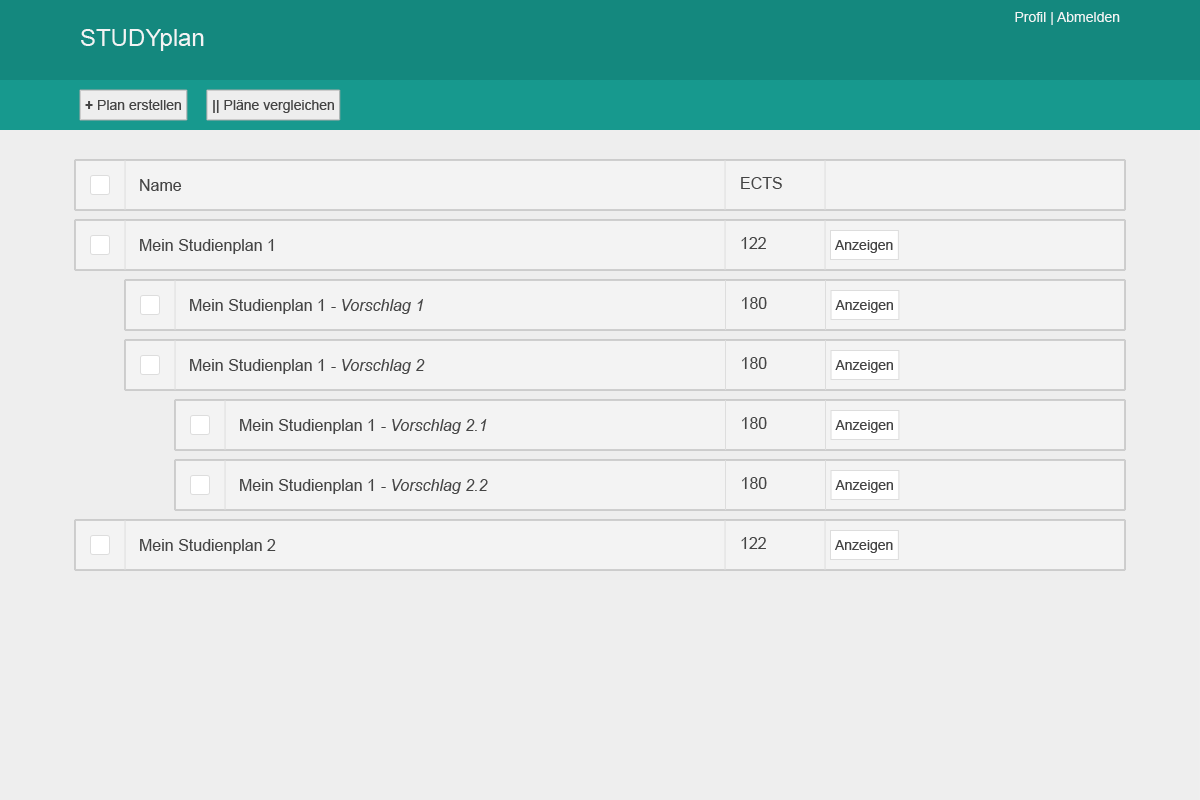
<style>
.page{position:relative;width:1200px;height:800px;background:#eeeeee}
.page>*{position:absolute;margin:0}
.t1{font:14px "ArialMT";color:#f3f3f3}
.t2{font:24px "ArialMT";color:#f3f3f3}
.t3{font:14px "ArialMT";color:#444444}
.t4{font:14px "Arial-BoldMT";color:#444444}
.t5{font:16px "ArialMT";color:#444444}
.t6{font:16px "Arial-ItalicMT";color:#444444}
</style>
<div class="page">
<p class="t1" style="left:1015px;top:12px;width:105px;height:13px">Profil | Abmelden</p>
<p class="t2" style="left:81px;top:29px;width:123px;height:22px">STUDYplan</p>
<p class="t3" style="left:85px;top:99px;width:96px;height:11px"><span class="t4">+</span> Plan erstellen</p>
<p class="t3" style="left:213px;top:100px;width:121px;height:13px"><span class="t4">||</span> Pläne vergleichen</p>
<p class="t5" style="left:140px;top:179px;width:42px;height:12px">Name</p>
<p class="t5" style="left:741px;top:177px;width:41px;height:12px">ECTS</p>
<p class="t5" style="left:140px;top:239px;width:134px;height:15px">Mein Studienplan 1</p>
<p class="t5" style="left:741px;top:237px;width:25px;height:12px">122</p>
<p class="t3" style="left:835px;top:240px;width:58px;height:13px">Anzeigen</p>
<p class="t5" style="left:190px;top:299px;width:233px;height:15px">Mein Studienplan 1<span class="t6"> - Vorschlag 1</span></p>
<p class="t5" style="left:742px;top:297px;width:25px;height:12px">180</p>
<p class="t3" style="left:835px;top:300px;width:58px;height:13px">Anzeigen</p>
<p class="t5" style="left:190px;top:359px;width:235px;height:15px">Mein Studienplan 1<span class="t6"> - Vorschlag 2</span></p>
<p class="t5" style="left:742px;top:357px;width:25px;height:12px">180</p>
<p class="t3" style="left:835px;top:360px;width:58px;height:13px">Anzeigen</p>
<p class="t5" style="left:240px;top:419px;width:247px;height:15px">Mein Studienplan 1<span class="t6"> - Vorschlag 2.1</span></p>
<p class="t5" style="left:742px;top:417px;width:25px;height:12px">180</p>
<p class="t3" style="left:835px;top:420px;width:58px;height:13px">Anzeigen</p>
<p class="t5" style="left:240px;top:479px;width:248px;height:15px">Mein Studienplan 1<span class="t6"> - Vorschlag 2.2</span></p>
<p class="t5" style="left:742px;top:477px;width:25px;height:12px">180</p>
<p class="t3" style="left:835px;top:480px;width:58px;height:13px">Anzeigen</p>
<p class="t5" style="left:140px;top:539px;width:136px;height:15px">Mein Studienplan 2</p>
<p class="t5" style="left:741px;top:537px;width:25px;height:12px">122</p>
<p class="t3" style="left:835px;top:540px;width:58px;height:13px">Anzeigen</p>
</div>
